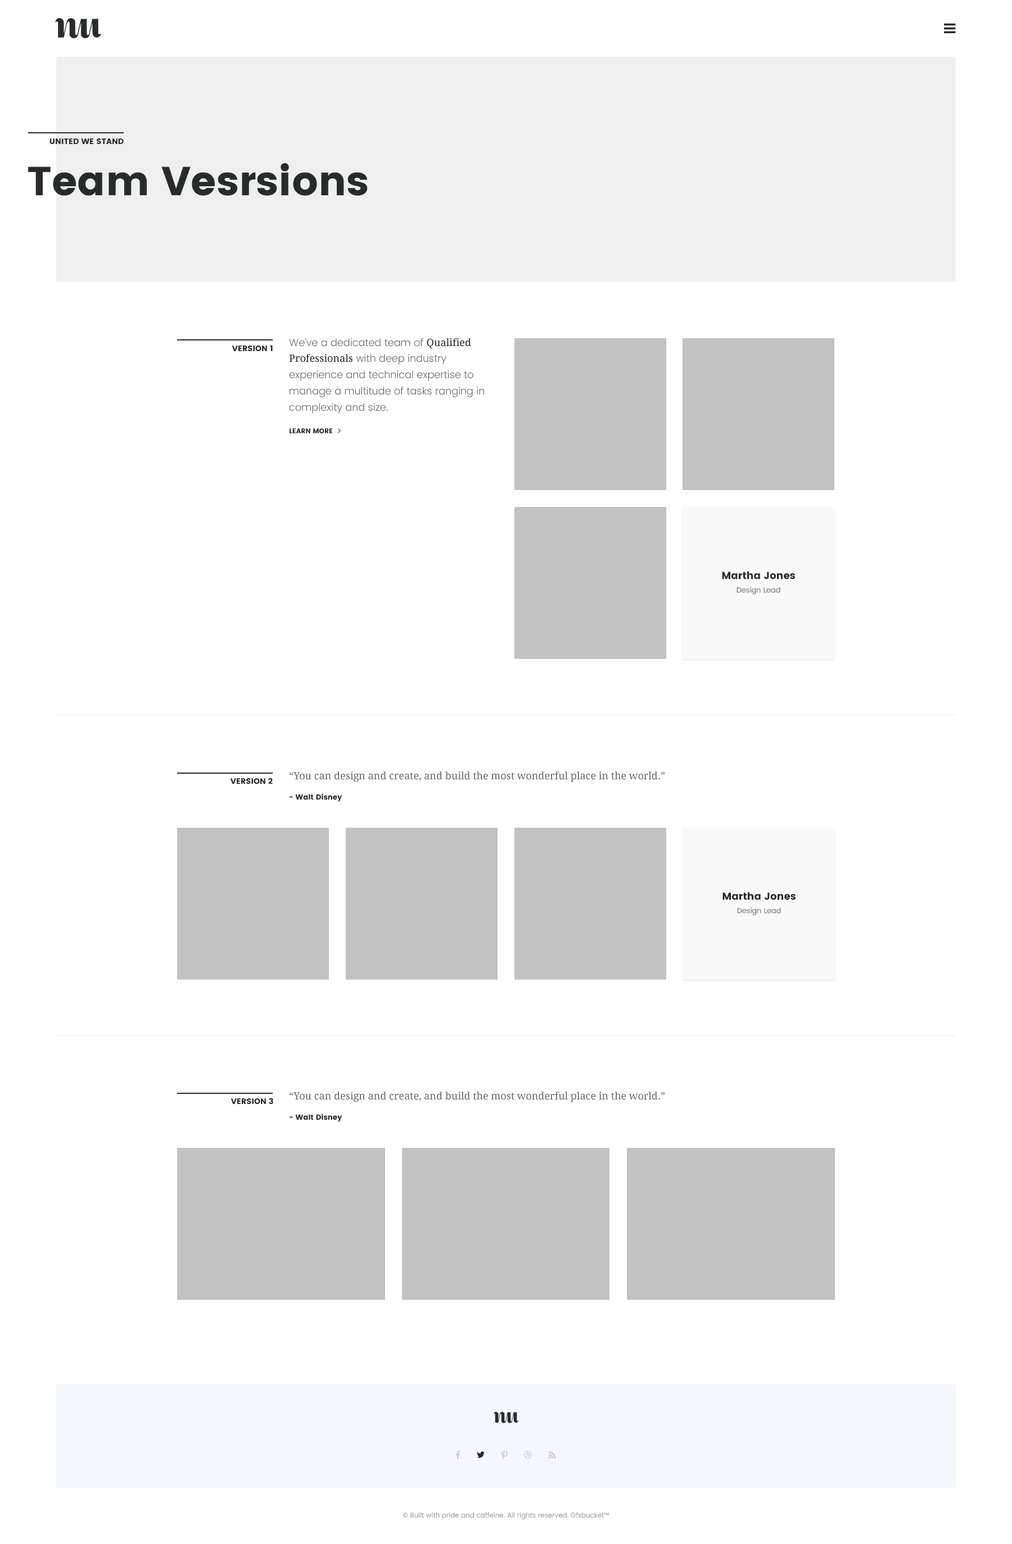
<style>
.page{position:relative;width:1012px;height:1544px;background:#ffffff}
.page>*{position:absolute;margin:0}
.t1{font:7.9px "Poppins";color:#272b2b;text-transform:uppercase}
.t2{font:40.5px "Poppins";color:#272b2b}
.t3{font:10.1px/16.2px "Poppins-Light";color:#676a6a}
.t4{font:10.1px/16.2px "DroidSerif";color:#272b2b}
.t5{font:6.8px "Poppins";color:#272b2b;text-transform:uppercase}
.t6{font:10.1px/16.9px "Poppins";color:#272b2b}
.t7{font:7.3px/13.5px "Poppins-Regular";color:#676a6a}
.t8{font:10.1px/21.6px "DroidSerif";color:#676a6a}
.t9{font:7.3px/20.2px "Poppins";color:#272b2b}
.t10{font:6.8px "Poppins-Regular";color:#949696}
</style>
<div class="page">
<p class="t1" style="left:50px;top:138px;width:74px;height:6px">United we stand</p>
<p class="t2" style="left:28px;top:163px;width:340px;height:33px">Team Vesrsions</p>
<p class="t3" style="left:289px;top:338px;width:195px;height:75px">We’ve a dedicated team of <span class="t4">Qualified Professionals</span> with deep industry experience and technical expertise to manage a multitude of tasks ranging in complexity and size.</p>
<p class="t1" style="left:232px;top:345px;width:41px;height:6px">Version 1</p>
<p class="t5" style="left:290px;top:428px;width:42px;height:5px">Learn More</p>
<p class="t6" style="left:722px;top:571px;width:73px;height:24px;text-align:center">Martha Jones<br><span class="t7">Design Lead</span></p>
<p class="t8" style="left:290px;top:771px;width:375px;height:31px">“You can design and create, and build the most wonderful place in the world.”<br><span class="t9">- Walt Disney</span></p>
<p class="t1" style="left:230px;top:777px;width:43px;height:7px">Version 2</p>
<p class="t6" style="left:723px;top:892px;width:73px;height:23px;text-align:center">Martha Jones<br><span class="t7">Design Lead</span></p>
<p class="t1" style="left:231px;top:1097px;width:42px;height:7px">Version 3</p>
<p class="t8" style="left:290px;top:1091px;width:375px;height:31px">“You can design and create, and build the most wonderful place in the world.”<br><span class="t9">- Walt Disney</span></p>
<p class="t10" style="left:403px;top:1511px;width:206px;height:8px">© Built with pride and caffeine. All rights reserved. Gfxbucket™</p>
</div>
